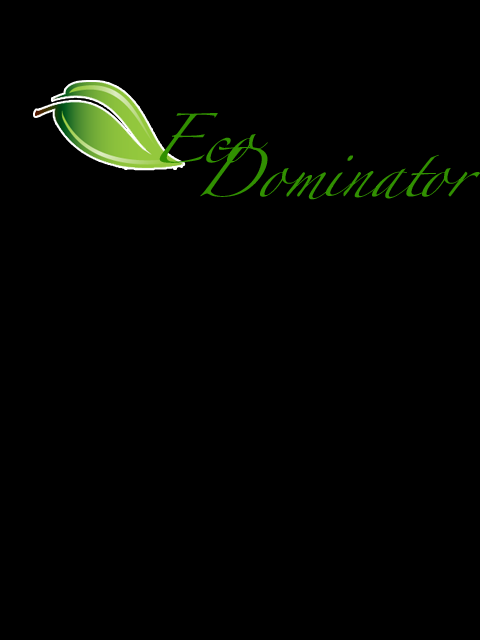
<style>
.page{position:relative;width:480px;height:640px;background:#000000}
.page>*{position:absolute;margin:0}
.t1{font:44.4px/34px "Zapfino";color:#319001;font-style:italic}
</style>
<div class="page">
<p class="t1" style="left:159px;top:113px;width:321px;height:87px">Eco<br>  Dominator</p>
</div>
